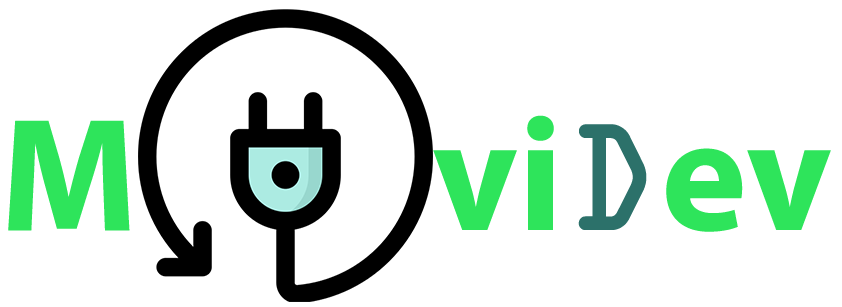
<style>
.page{position:relative;width:842px;height:307px;background:#ffffff}
.page>*{position:absolute;margin:0}
.t1{font:162.7px "MyriadPro-Bold";color:#2ee45b}
.t2{font:162.7px "MVBoli";color:#16c7cd}
.t3{font:162.7px "MyriadPro-Bold";color:#2dd05f}
.t4{font:162.7px "OCRAExtended";color:#2c716a}
</style>
<div class="page">
<p class="t1" style="left:8px;top:120px;width:122px;height:111px">M<br>aster<span class="t2">d</span><span class="t3">ev</span></p>
<p class="t1" style="left:433px;top:115px;width:398px;height:117px">vi<span class="t4">D</span>ev</p>
</div>
